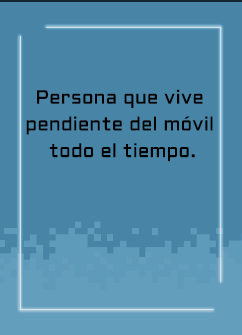
<style>
.page{position:relative;width:242px;height:335px;background:#4784a5}
.page>*{position:absolute;margin:0}
.t1{font:19.2px/26.7px "Aldrich-Regular";letter-spacing:0.005em;color:#000000}
</style>
<div class="page">
<p class="t1" style="left:26px;top:89px;width:187px;height:73px;text-align:center">Persona que vive <br>pendiente del móvil <br>todo el tiempo.</p>
</div>
